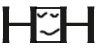
<style>
.page{position:relative;width:96px;height:48px;background:#ffffff}
.page>*{position:absolute;margin:0}
.t1{font:52px "222-CAI978";color:#1a1b19}
</style>
<div class="page">
<p class="t1" style="left:2px;top:6px;width:93px;height:37px">H H</p>
</div>
